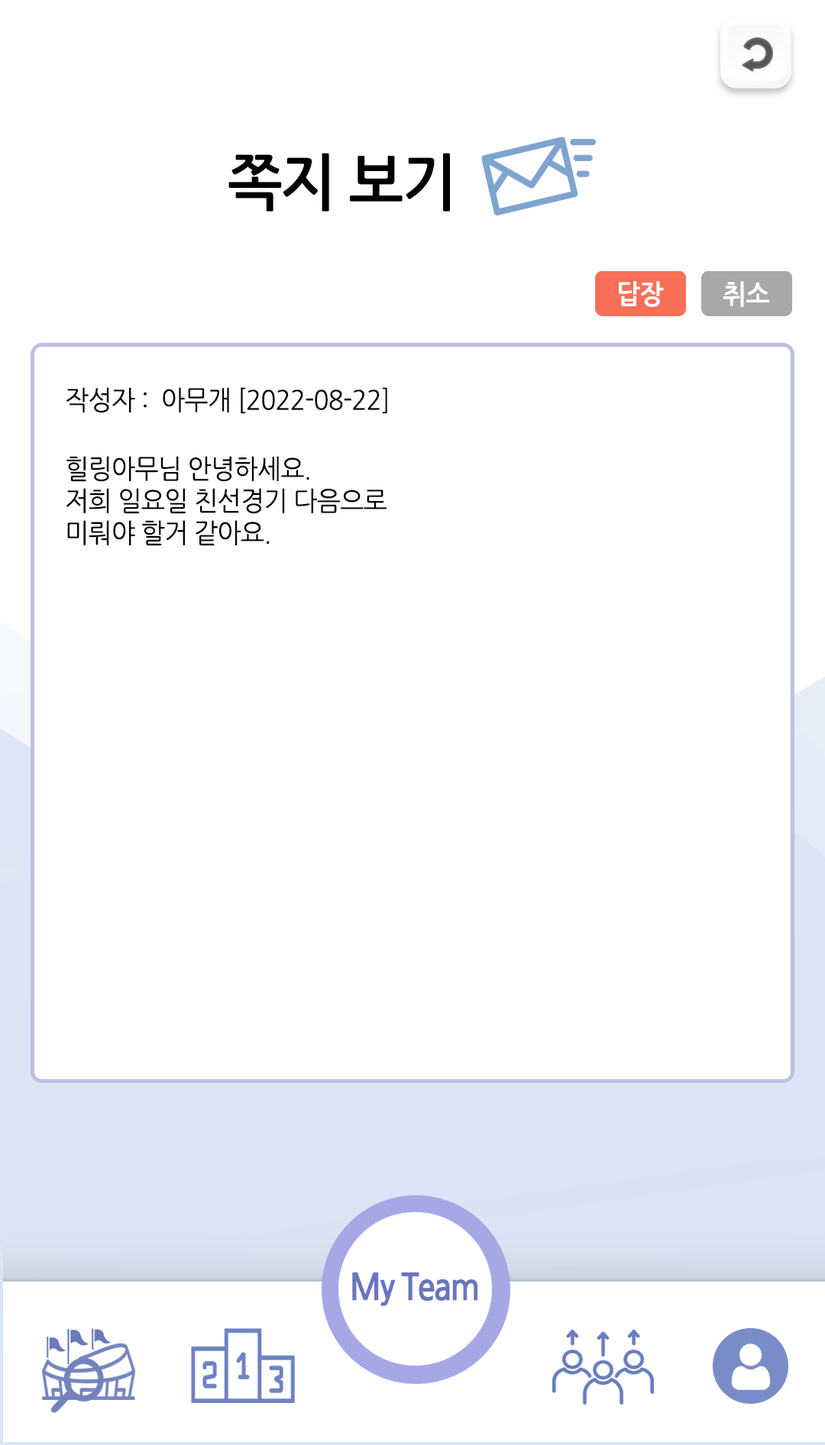
<style>
.page{position:relative;width:825px;height:1445px;background:#ffffff}
.page>*{position:absolute;margin:0}
.t1{font:61.1px "NanumGothicBold";letter-spacing:-0.025em;color:#000000;scale:0.95 1}
.t2{font:26.7px "NanumGothicBold";letter-spacing:-0.025em;color:#ffffff;scale:0.95 1}
.t3{font:26.7px "NanumGothic";letter-spacing:-0.025em;color:#000000;scale:0.95 1}
</style>
<div class="page">
<p class="t1" style="left:228px;top:153px;width:222px;height:59px">쪽지 보기</p>
<p class="t2" style="left:619px;top:281px;width:45px;height:26px">답장</p>
<p class="t2" style="left:723px;top:281px;width:46px;height:26px">취소</p>
<p class="t3" style="left:66px;top:387px;width:321px;height:27px">작성자 :  아무개 [2022-08-22]</p>
<p class="t3" style="left:66px;top:456px;width:321px;height:90px">힐링아무님 안녕하세요.<br>저희 일요일 친선경기 다음으로<br>미뤄야 할거 같아요.</p>
</div>
